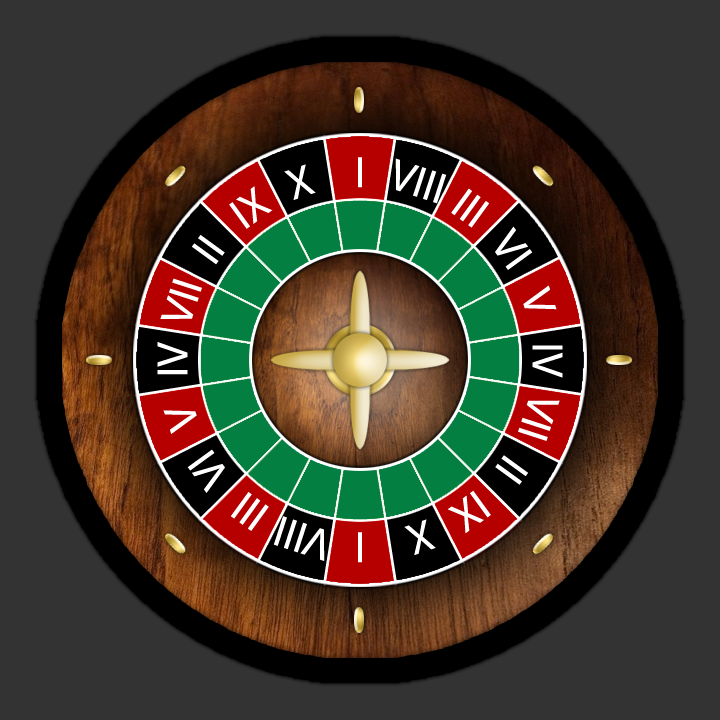
<style>
.page{position:relative;width:720px;height:720px;background:#333333}
.page>*{position:absolute;margin:0}
.t1{font:44px "MyriadPro-Regular";color:#ffffff}
</style>
<div class="page">
<p class="t1" style="left:358px;top:157px;width:4px;height:31px">I</p>
<p class="t1" style="left:395px;top:158px;width:52px;height:46px;rotate:18deg">VIII</p>
<p class="t1" style="left:284px;top:164px;width:32px;height:36px;rotate:-19deg">X</p>
<p class="t1" style="left:229px;top:186px;width:44px;height:43px;rotate:-36deg">IX</p>
<p class="t1" style="left:451px;top:188px;width:38px;height:40px;rotate:36deg">III</p>
<p class="t1" style="left:495px;top:226px;width:38px;height:44px;rotate:54deg">VI</p>
<p class="t1" style="left:192px;top:235px;width:33px;height:30px;rotate:-54deg">II</p>
<p class="t1" style="left:160px;top:278px;width:42px;height:41px;rotate:-72deg">VII</p>
<p class="t1" style="left:523px;top:285px;width:34px;height:25px;rotate:72deg">V</p>
<p class="t1" style="left:157px;top:342px;width:31px;height:33px;rotate:-90deg">IV</p>
<p class="t1" style="left:532px;top:345px;width:31px;height:33px;rotate:90deg">IV</p>
<p class="t1" style="left:518px;top:400px;width:42px;height:41px;rotate:108deg">VII</p>
<p class="t1" style="left:163px;top:410px;width:34px;height:24px;rotate:-108deg">V</p>
<p class="t1" style="left:187px;top:449px;width:38px;height:44px;rotate:-126deg">VI</p>
<p class="t1" style="left:495px;top:455px;width:33px;height:30px;rotate:126deg">II</p>
<p class="t1" style="left:231px;top:492px;width:38px;height:39px;rotate:-144deg">III</p>
<p class="t1" style="left:447px;top:490px;width:44px;height:44px;rotate:144deg">IX</p>
<p class="t1" style="left:273px;top:516px;width:52px;height:45px;rotate:-162deg">VIII</p>
<p class="t1" style="left:404px;top:519px;width:32px;height:36px;rotate:161deg">X</p>
<p class="t1" style="left:358px;top:532px;width:4px;height:31px;rotate:180deg">I</p>
</div>
